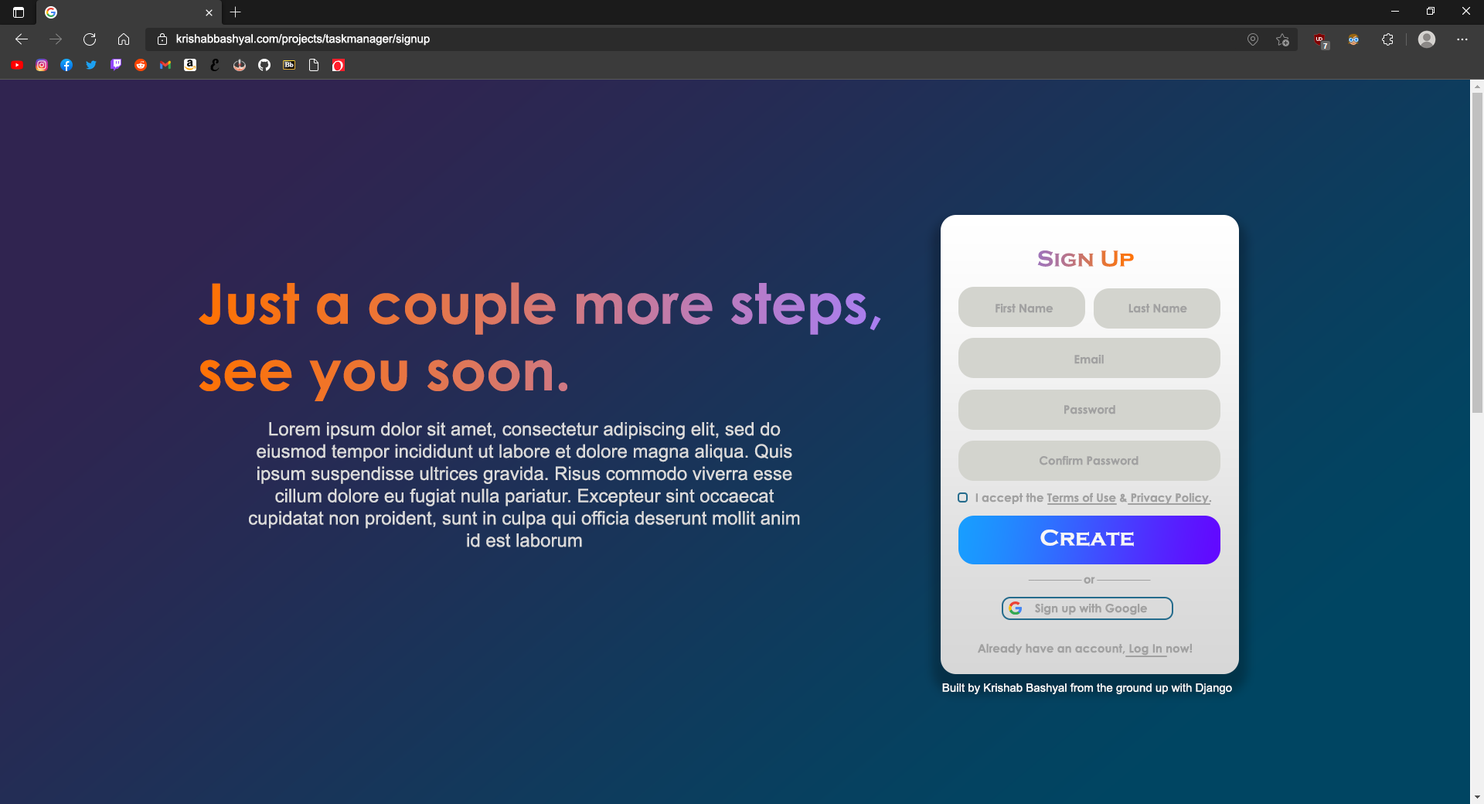
<style>
.page{position:relative;width:1484px;height:804px}
.page>*{position:absolute;margin:0}
.t1{font:11.6px "ArialMT";color:#ffffff}
.t2{font:23.2px "CopperplateGothic-Bold"}
.t3{font:55.6px "CenturyGothic-Bold"}
.t4{font:11.6px "CenturyGothic-Bold";color:#a1a1a1}
.t5{font:18.5px "ArialMT";color:#dbdbdb}
.t6{font:23.2px "CopperplateGothic-Bold";color:#f6f6f6}
</style>
<div class="page">
<p class="t1" style="left:176px;top:34px;width:254px;height:12px">krishabbashyal.com/projects/taskmanager/signup</p>
<p class="t2" style="left:1037px;top:250px;width:97px;height:17px">Sign Up</p>
<p class="t3" style="left:199px;top:282px;width:682px;height:119px">Just a couple more steps,<br>see you soon.</p>
<p class="t4" style="left:995px;top:303px;width:58px;height:10px">First Name</p>
<p class="t4" style="left:1128px;top:304px;width:59px;height:9px">Last Name</p>
<p class="t4" style="left:1074px;top:354px;width:30px;height:10px">Email</p>
<p class="t4" style="left:1064px;top:405px;width:51px;height:9px">Password</p>
<p class="t5" style="left:249px;top:422px;width:551px;height:125px;text-align:center">Lorem ipsum dolor sit amet, consectetur adipiscing elit, sed do eiusmod tempor incididunt ut labore et dolore magna aliqua. Quis ipsum suspendisse ultrices gravida. Risus commodo viverra esse cillum dolore eu fugiat nulla pariatur. Excepteur sint occaecat cupidatat non proident, sunt in culpa qui officia deserunt mollit anim id est laborum</p>
<p class="t4" style="left:1039px;top:455px;width:99px;height:10px">Confirm Password</p>
<p class="t4" style="left:975px;top:492px;width:237px;height:12px">I accept the Terms of Use &amp; Privacy Policy.</p>
<p class="t6" style="left:1040px;top:529px;width:94px;height:17px">Create</p>
<p class="t4" style="left:1083px;top:576px;width:12px;height:7px">or</p>
<p class="t4" style="left:1035px;top:603px;width:112px;height:12px">Sign up with Google</p>
<p class="t4" style="left:978px;top:643px;width:214px;height:12px">Already have an account, Log In now!</p>
<p class="t1" style="left:942px;top:682px;width:290px;height:12px">Built by Krishab Bashyal from the ground up with Django</p>
</div>
